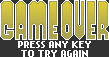
<style>
.page{position:relative;width:109px;height:57px;background:#333333}
.page>*{position:absolute;margin:0}
.t1{font:8px "NokiaCellphoneFC-Small";color:#ffffff}
</style>
<div class="page">
<p class="t1" style="left:18px;top:41px;width:73px;height:16px;text-align:center">PRESS ANY KEY<br>TO TRY AGAIN</p>
</div>
